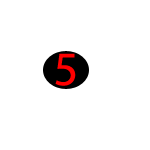
<style>
.page{position:relative;width:150px;height:150px;background:#ffffff}
.page>*{position:absolute;margin:0}
.t1{font:48px "MyriadPro-Regular";color:#fe0000}
</style>
<div class="page">
<p class="t1" style="left:55px;top:53px;width:21px;height:33px">5</p>
</div>
